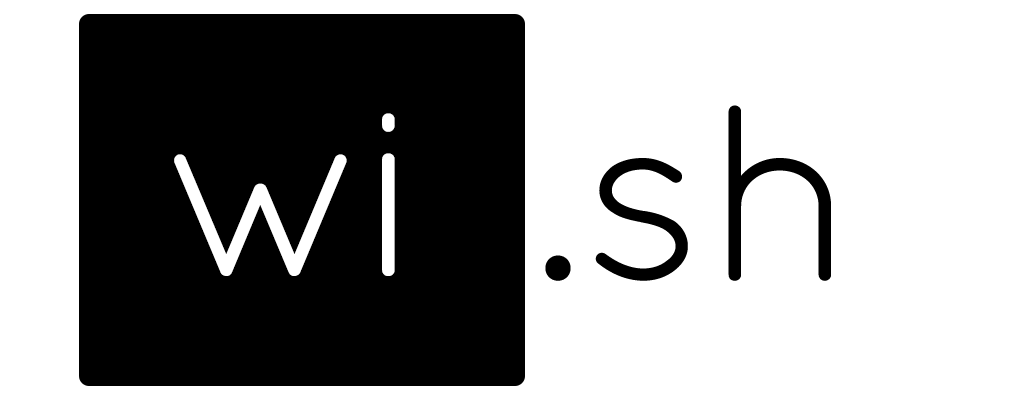
<style>
.page{position:relative;width:1028px;height:400px;background:#ffffff}
.page>*{position:absolute;margin:0}
.t1{font:250px "Quicksand-Regular";color:#ffffff}
.t2{font:250px "Quicksand-Regular";color:#000000}
</style>
<div class="page">
<p class="t1" style="left:174px;top:113px;width:221px;height:163px">wi</p>
<p class="t2" style="left:545px;top:105px;width:286px;height:176px">.sh</p>
</div>
